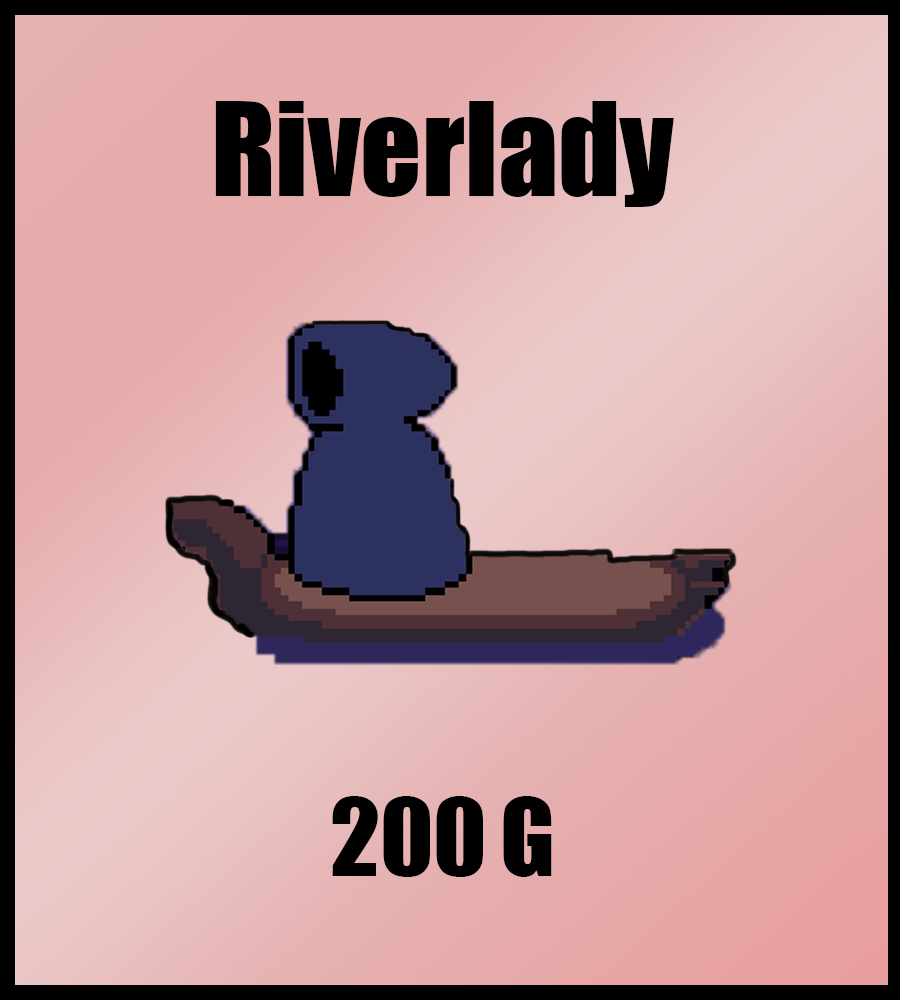
<style>
.page{position:relative;width:900px;height:1000px}
.page>*{position:absolute;margin:0}
.t1{font:120px "Impact";color:#000000}
.t2{font:100px "Impact";color:#000000}
</style>
<div class="page">
<p class="t1" style="left:215px;top:101px;width:459px;height:106px">Riverlady</p>
<p class="t2" style="left:332px;top:796px;width:220px;height:81px">200 G</p>
</div>
